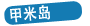
<style>
.page{position:relative;width:90px;height:26px;background:#147bb3}
.page>*{position:absolute;margin:0}
.t1{font:15.9px "AdobeHeitiStd-Regular";letter-spacing:-0.01em;color:#ffffff;scale:0.9 1}
</style>
<div class="page">
<p class="t1" style="left:10px;top:5px;width:40px;height:18px;rotate:-5deg">甲米岛</p>
</div>
